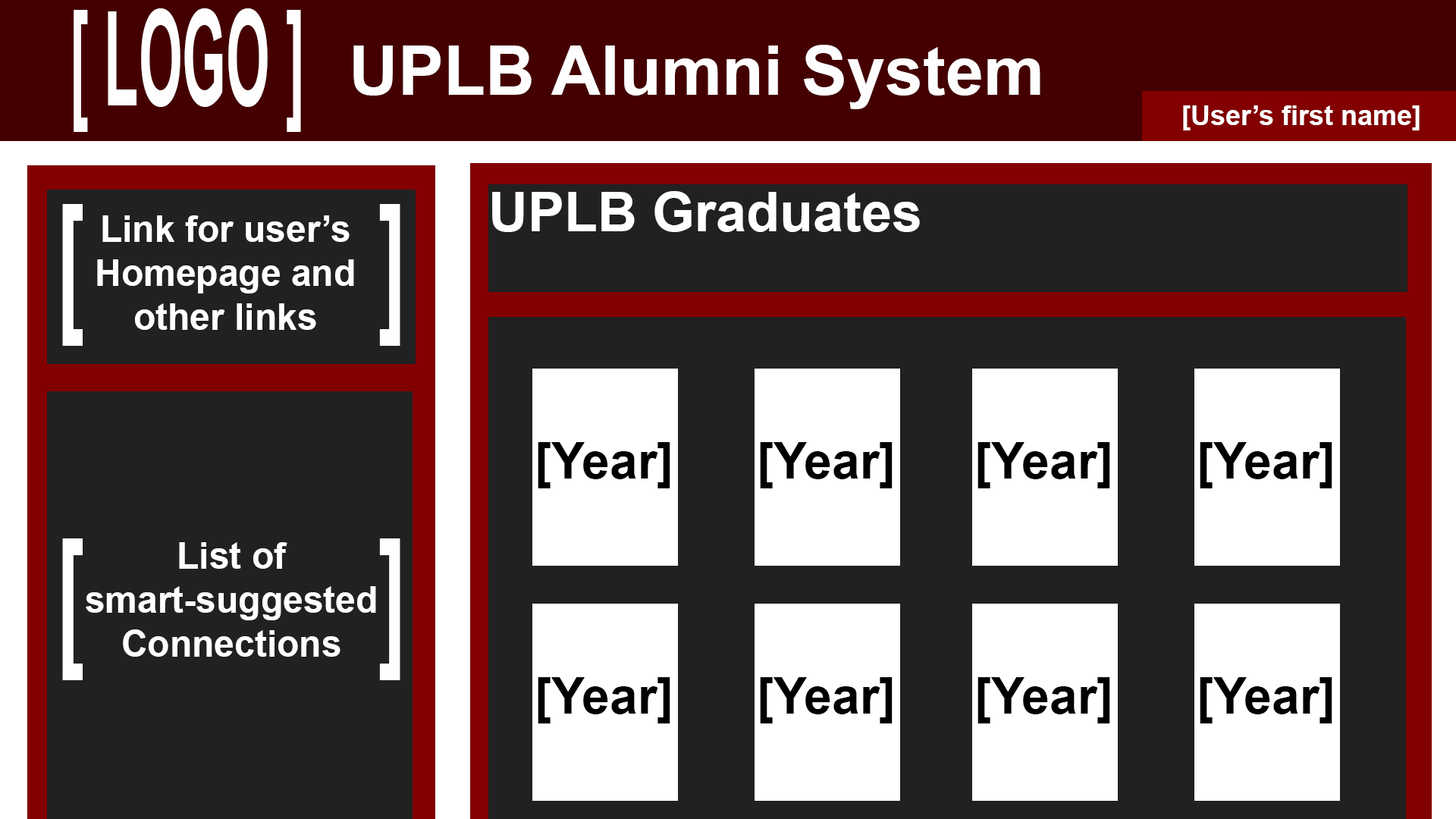
<style>
.page{position:relative;width:1456px;height:819px;background:#212121}
.page>*{position:absolute;margin:0}
.t1{font:132.9px "Arial-BoldMT";color:#fffefe;scale:0.42 1}
.t2{font:68.2px "Arial-BoldMT";color:#fffefe}
.t3{font:27.3px "Arial-BoldMT";color:#ffffff}
.t4{font:54.6px "Arial-BoldMT";color:#ffffff}
.t5{font:154.8px "Arial-BoldMT";color:#ffffff;scale:0.53 1}
.t6{font:36.4px "Arial-BoldMT";color:#ffffff}
.t7{font:50px "Arial-BoldMT";color:#000000}
</style>
<div class="page">
<p class="t1" style="left:74px;top:8px;width:227px;height:124px">[ LOGO ]</p>
<p class="t2" style="left:353px;top:45px;width:687px;height:64px">UPLB Alumni System</p>
<p class="t3" style="left:1183px;top:105px;width:237px;height:25px">[User’s first name]</p>
<p class="t4" style="left:492px;top:191px;width:428px;height:41px">UPLB Graduates</p>
<p class="t5" style="left:62px;top:204px;width:338px;height:142px">[             ]</p>
<p class="t6" style="left:97px;top:215px;width:257px;height:115px;text-align:center">Link for user’s Homepage and other links</p>
<p class="t7" style="left:538px;top:442px;width:132px;height:46px">[Year]</p>
<p class="t7" style="left:760px;top:442px;width:133px;height:46px">[Year]</p>
<p class="t7" style="left:977px;top:442px;width:133px;height:46px">[Year]</p>
<p class="t7" style="left:1200px;top:442px;width:132px;height:46px">[Year]</p>
<p class="t5" style="left:62px;top:538px;width:338px;height:142px">[             ]</p>
<p class="t6" style="left:86px;top:542px;width:290px;height:115px;text-align:center">List of<br>smart-suggested Connections</p>
<p class="t7" style="left:538px;top:677px;width:132px;height:46px">[Year]</p>
<p class="t7" style="left:760px;top:677px;width:133px;height:46px">[Year]</p>
<p class="t7" style="left:977px;top:677px;width:133px;height:46px">[Year]</p>
<p class="t7" style="left:1200px;top:677px;width:132px;height:46px">[Year]</p>
</div>
